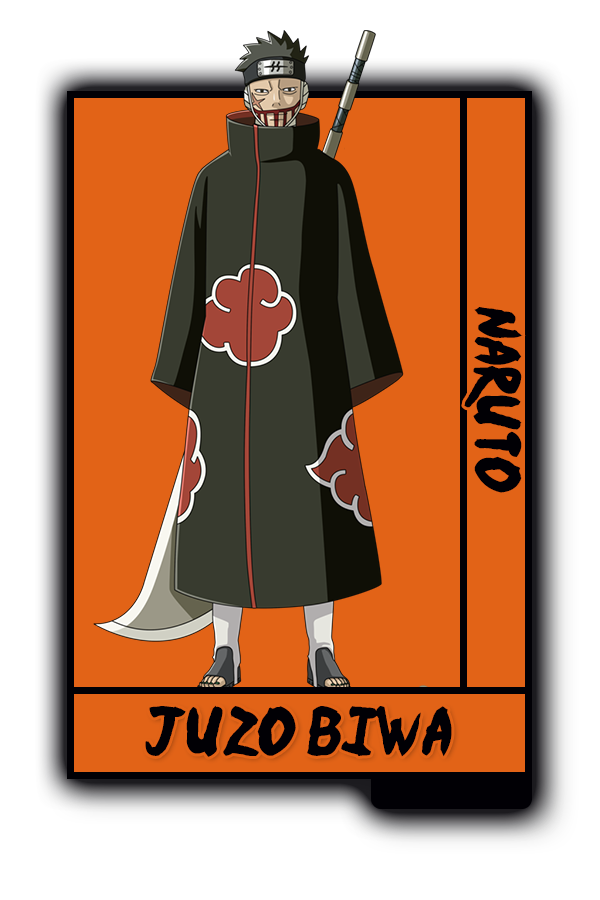
<style>
.page{position:relative;width:600px;height:900px;background:#e26317}
.page>*{position:absolute;margin:0}
.t1{font:52px "Ninja-Naruto";color:#010005}
.t2{font:55.4px "Ninja-Naruto";color:#010005}
</style>
<div class="page">
<p class="t1" style="left:464px;top:307px;width:59px;height:186px;rotate:90deg">Naruto</p>
<p class="t2" style="left:145px;top:705px;width:307px;height:52px">juzo Biwa</p>
</div>
